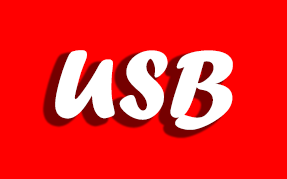
<style>
.page{position:relative;width:287px;height:179px;background:#ff0000}
.page>*{position:absolute;margin:0}
.t1{font:100px "ForteMT";color:#ffffff}
</style>
<div class="page">
<p class="t1" style="left:55px;top:50px;width:178px;height:80px">USB</p>
</div>
